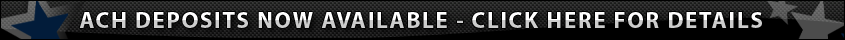
<style>
.page{position:relative;width:845px;height:40px;background:#000000}
.page>*{position:absolute;margin:0}
.t1{font:23px "Myriad-Bold";letter-spacing:0.075em}
</style>
<div class="page">
<p class="t1" style="left:79px;top:9px;width:685px;height:25px">ACH DEPOSITS NOW AVAILABLE - CLICK HERE FOR DETAILS</p>
</div>
